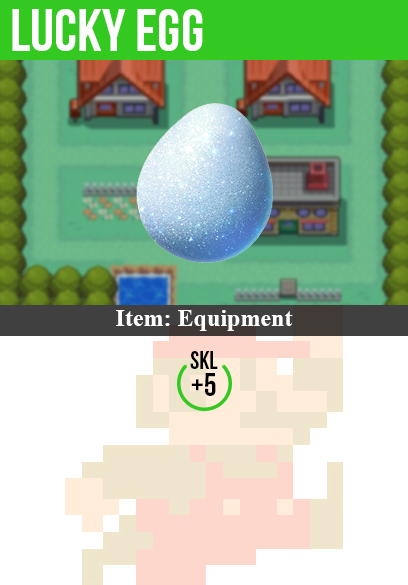
<style>
.page{position:relative;width:408px;height:585px;background:#ffffff}
.page>*{position:absolute;margin:0}
.t1{font:60px "BebasNeue";color:#ffffff}
.t2{font:24px "TimesNewRomanPS-BoldMT";color:#ffffff}
.t3{font:25px "BebasNeue";color:#000000}
.t4{font:32px "BebasNeue";color:#000000}
</style>
<div class="page">
<p class="t1" style="left:12px;top:9px;width:191px;height:42px">lucky egg</p>
<p class="t2" style="left:116px;top:310px;width:177px;height:21px">Item: Equipment</p>
<p class="t3" style="left:190px;top:351px;width:28px;height:18px">skl</p>
<p class="t4" style="left:191px;top:373px;width:25px;height:23px">+5</p>
</div>
